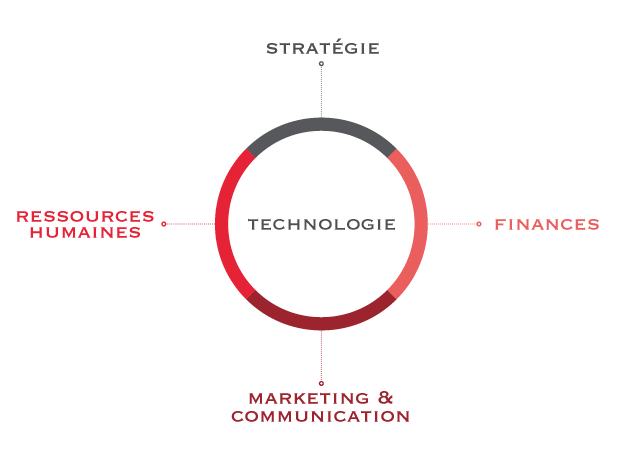
<style>
.page{position:relative;width:641px;height:461px;background:#ffffff}
.page>*{position:absolute;margin:0}
.t1{font:24px "Copperplate";color:#504f4f}
.t2{font:24px/16px "Copperplate";color:#e62336}
.t3{font:24px "Copperplate";color:#eb5e5e}
.t4{font:24px/18px "Copperplate";color:#9c242e}
</style>
<div class="page">
<p class="t1" style="left:266px;top:38px;width:113px;height:16px">stratégie</p>
<p class="t2" style="left:16px;top:210px;width:138px;height:28px;text-align:center">ressources<br>humaines</p>
<p class="t1" style="left:248px;top:218px;width:147px;height:12px">technologie</p>
<p class="t3" style="left:495px;top:218px;width:104px;height:12px">finances</p>
<p class="t4" style="left:231px;top:391px;width:178px;height:31px;text-align:center">marketing &amp;<br>communication</p>
</div>
